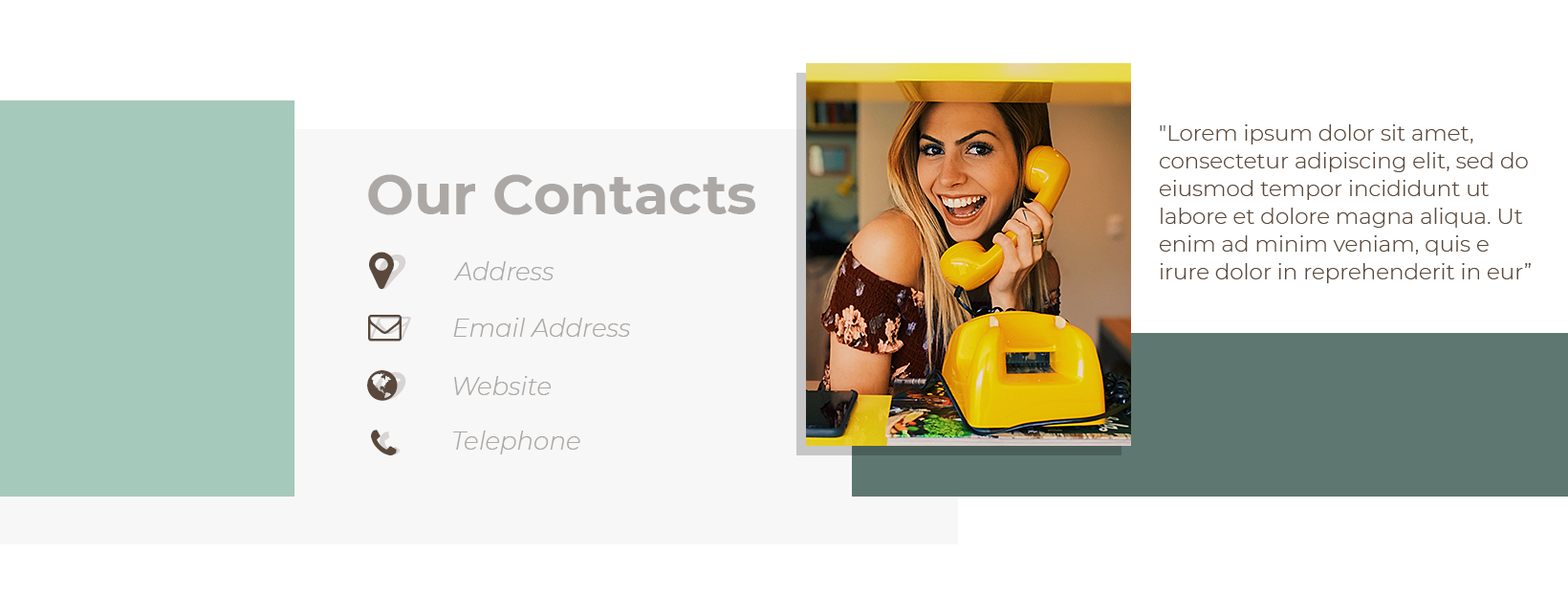
<style>
.page{position:relative;width:1568px;height:597px;background:#ffffff}
.page>*{position:absolute;margin:0}
.t1{font:22px/27.7px "Montserrat-Light";color:#59483b}
.t2{font:56.4px "Montserrat-Bold";color:#aca8a5}
.t3{font:24.9px "Montserrat-LightItalic";color:#aca8a5}
</style>
<div class="page">
<p class="t1" style="left:1160px;top:124px;width:371px;height:159px">"Lorem ipsum dolor sit amet, consectetur adipiscing elit, sed do eiusmod tempor incididunt ut labore et dolore magna aliqua. Ut enim ad minim veniam, quis e irure dolor in reprehenderit in eur”</p>
<p class="t2" style="left:368px;top:174px;width:387px;height:41px">Our Contacts</p>
<p class="t3" style="left:453px;top:261px;width:102px;height:19px">Address</p>
<p class="t3" style="left:453px;top:317px;width:178px;height:20px">Email Address</p>
<p class="t3" style="left:454px;top:376px;width:97px;height:19px">Website</p>
<p class="t3" style="left:453px;top:430px;width:127px;height:24px">Telephone</p>
</div>
